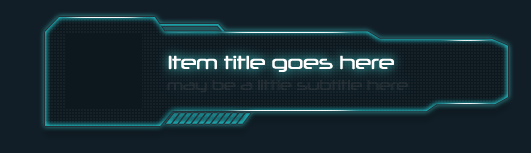
<style>
.page{position:relative;width:531px;height:153px;background:#111e27}
.page>*{position:absolute;margin:0}
.t1{font:18.1px "Neuropol-Regular";color:#ffffff}
.t2{font:13.6px "Neuropol-Regular";color:#283138}
</style>
<div class="page">
<p class="t1" style="left:168px;top:55px;width:226px;height:17px">Item title goes here</p>
<p class="t2" style="left:167px;top:80px;width:241px;height:13px">may be a little subtitle here</p>
</div>
